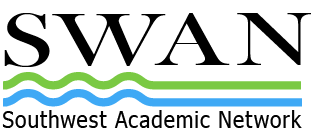
<style>
.page{position:relative;width:315px;height:133px;background:#ffffff}
.page>*{position:absolute;margin:0}
.t1{font:78.1px "BaskOldFace";color:#000000;scale:1.33 1}
.t2{font:22.9px "Tahoma";letter-spacing:0.049em;color:#020202;scale:0.91 1}
</style>
<div class="page">
<p class="t1" style="left:4px;top:13px;width:162px;height:54px">SW</p>
<p class="t1" style="left:154px;top:13px;width:76px;height:52px">A</p>
<p class="t1" style="left:237px;top:13px;width:74px;height:52px">N</p>
<p class="t2" style="left:2px;top:110px;width:300px;height:18px">Southwest Academic Network</p>
</div>
